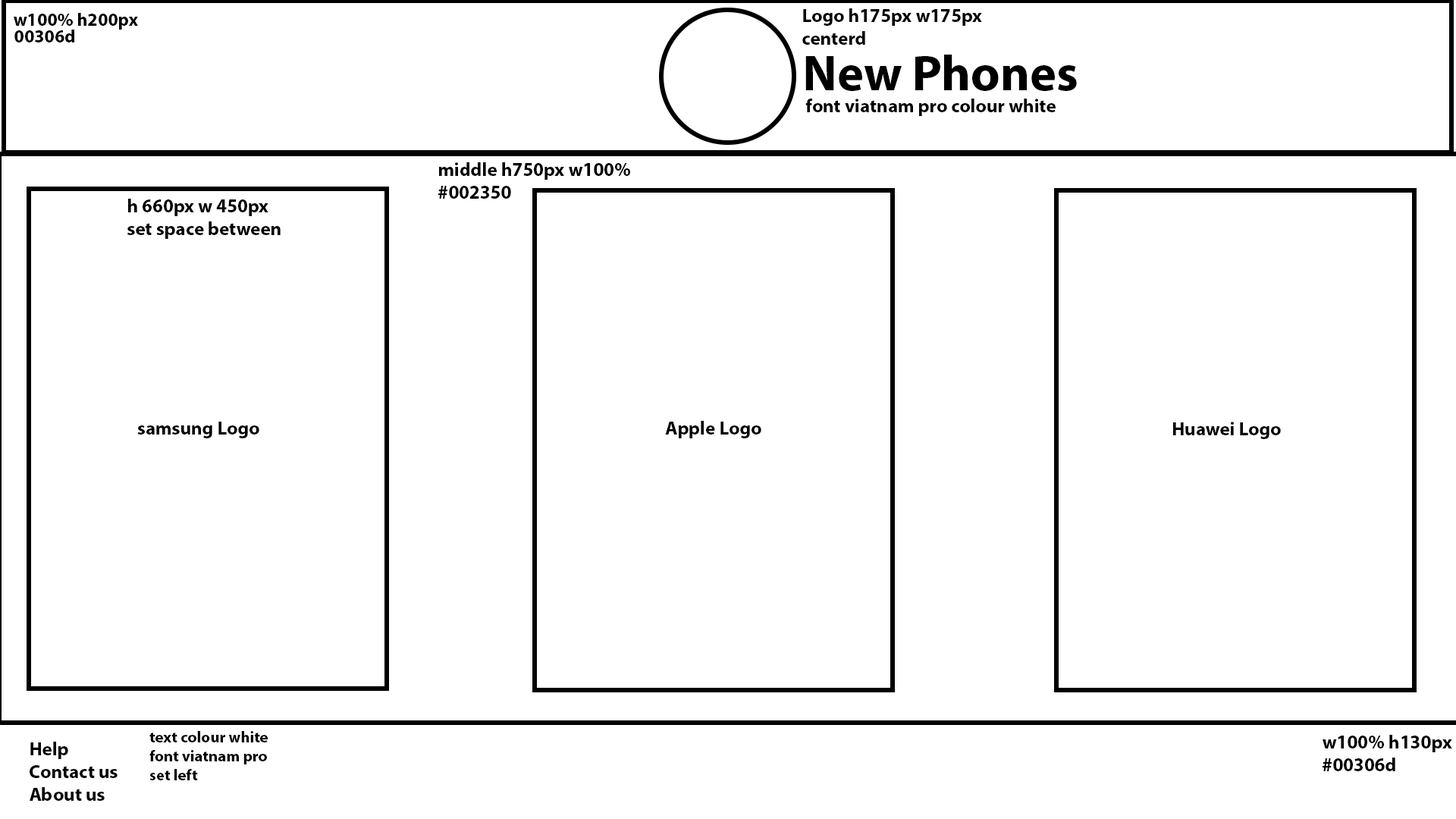
<style>
.page{position:relative;width:1456px;height:819px;background:#ffffff}
.page>*{position:absolute;margin:0}
.t1{font:18.2px "MyriadPro-Bold";color:#000000}
.t2{font:19px "MyriadPro-Bold";color:#000000}
.t3{font:50.6px "MyriadPro-Bold";color:#000000}
.t4{font:15.8px "MyriadPro-Bold";color:#000000}
</style>
<div class="page">
<p class="t1" style="left:14px;top:13px;width:124px;height:17px">w100% h200px</p>
<p class="t2" style="left:802px;top:8px;width:180px;height:37px">Logo h175px w175px<br>centerd</p>
<p class="t1" style="left:14px;top:30px;width:60px;height:12px">00306d</p>
<p class="t3" style="left:805px;top:55px;width:272px;height:36px">New Phones</p>
<p class="t2" style="left:805px;top:99px;width:251px;height:17px">font viatnam pro colour white</p>
<p class="t2" style="left:438px;top:162px;width:192px;height:37px">middle h750px w100%<br>#002350</p>
<p class="t2" style="left:127px;top:199px;width:154px;height:40px">h 660px w 450px<br>set space between</p>
<p class="t2" style="left:137px;top:422px;width:122px;height:16px">samsung Logo</p>
<p class="t2" style="left:665px;top:421px;width:96px;height:17px">Apple Logo</p>
<p class="t2" style="left:1173px;top:422px;width:108px;height:17px">Huawei Logo</p>
<p class="t4" style="left:149px;top:731px;width:119px;height:49px">text colour white<br>font viatnam pro<br>set left</p>
<p class="t2" style="left:1323px;top:735px;width:129px;height:36px">w100% h130px<br>#00306d</p>
<p class="t2" style="left:30px;top:742px;width:88px;height:59px">Help<br>Contact us<br>About us</p>
</div>
